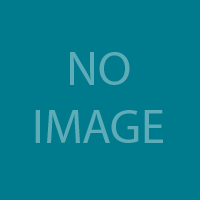
<style>
.page{position:relative;width:200px;height:200px;background:#007b8d}
.page>*{position:absolute;margin:0}
.t1{font:48px "MyriadPro-Regular";color:#5eacb7}
</style>
<div class="page">
<p class="t1" style="left:35px;top:52px;width:128px;height:91px;text-align:center">NO<br>IMAGE</p>
</div>
